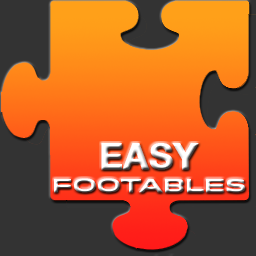
<style>
.page{position:relative;width:256px;height:256px;background:#333333}
.page>*{position:absolute;margin:0}
.t1{font:35.6px "HelveticaNeue-Bold";color:#ffffff;text-transform:uppercase;font-weight:bold}
.t2{font:18px "Idlewild-Bold";font-weight:bold}
</style>
<div class="page">
<p class="t1" style="left:101px;top:143px;width:98px;height:27px">Easy</p>
<p class="t2" style="left:54px;top:178px;width:191px;height:15px">FooTables</p>
</div>
